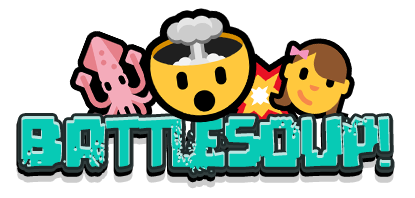
<style>
.page{position:relative;width:415px;height:198px;background:#ffffff}
.page>*{position:absolute;margin:0}
.t1{font:72px "pixeldead";letter-spacing:-0.074em;color:#07cab5}
</style>
<div class="page">
<p class="t1" style="left:21px;top:115px;width:370px;height:58px">BATTLESOUP!</p>
</div>
